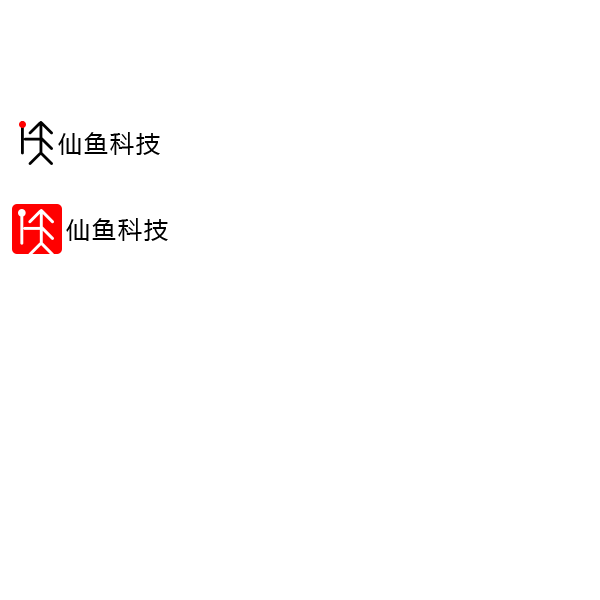
<style>
.page{position:relative;width:600px;height:600px;background:#ffffff}
.page>*{position:absolute;margin:0}
.t1{font:24px "MicrosoftYaHei";letter-spacing:0.08em;color:#000000}
</style>
<div class="page">
<p class="t1" style="left:58px;top:132px;width:102px;height:23px">仙鱼科技</p>
<p class="t1" style="left:66px;top:218px;width:102px;height:23px">仙鱼科技</p>
</div>
